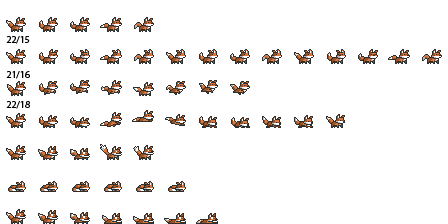
<style>
.page{position:relative;width:448px;height:224px;background:#ffffff}
.page>*{position:absolute;margin:0}
.t1{font:10px "MyriadPro-Regular";color:#000000}
</style>
<div class="page">
<p class="t1" style="left:6px;top:36px;width:24px;height:8px">22/15</p>
<p class="t1" style="left:6px;top:71px;width:24px;height:8px">21/16</p>
<p class="t1" style="left:6px;top:101px;width:24px;height:8px">22/18</p>
</div>
